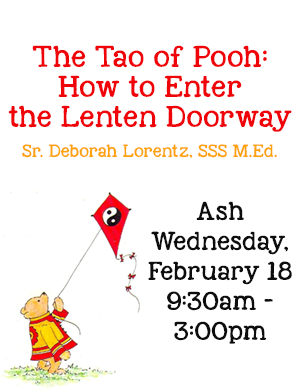
<style>
.page{position:relative;width:300px;height:392px;background:#ffffff}
.page>*{position:absolute;margin:0}
.t1{font:22px/30px "KGNexttoMeSolid";color:#ef0409}
.t2{font:13px/30px "KGNexttoMeSolid";color:#fda209}
.t3{font:19px/30px "KGNexttoMeSolid";color:#0d0d0d}
</style>
<div class="page">
<p class="t1" style="left:8px;top:45px;width:284px;height:113px;text-align:center">The Tao of Pooh: How to Enter <br>the Lenten Doorway<br><span class="t2">Sr. Deborah Lorentz, SSS M.Ed.</span></p>
<p class="t3" style="left:148px;top:201px;width:144px;height:143px;text-align:center">Ash <br>Wednesday,<br>February 18<br>9:30am - <br>3:00pm</p>
</div>
